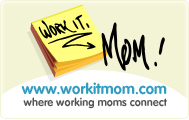
<style>
.page{position:relative;width:189px;height:120px;background:#f3f3d6}
.page>*{position:absolute;margin:0}
.t1{font:15px "VAGRounded-Bold";color:#329dc0}
.t2{font:10.9px "VAGRounded-Bold";color:#525252}
</style>
<div class="page">
<p class="t1" style="left:21px;top:82px;width:146px;height:13px">www.workitmom.com</p>
<p class="t2" style="left:23px;top:97px;width:145px;height:12px">where working moms connect</p>
</div>
